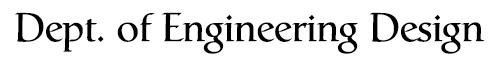
<style>
.page{position:relative;width:500px;height:60px;background:#ffffff}
.page>*{position:absolute;margin:0}
.t1{font:40px "Catull";color:#000000}
</style>
<div class="page">
<p class="t1" style="left:14px;top:12px;width:471px;height:42px">Dept. of Engineering Design</p>
</div>
